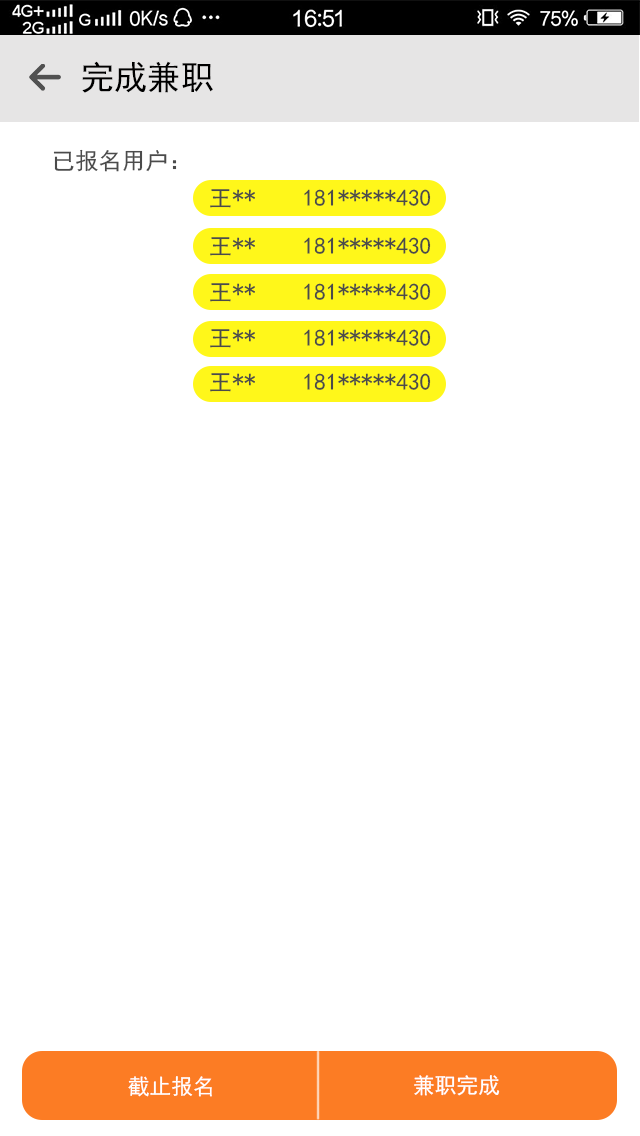
<style>
.page{position:relative;width:640px;height:1136px;background:#ffffff}
.page>*{position:absolute;margin:0}
.t1{font:33.3px "SimHei";letter-spacing:0.002em;color:#000000}
.t2{font:23.3px "SimHei";letter-spacing:0.002em;color:#4b4b4b}
.t3{font:21.7px "SimHei";letter-spacing:0.002em;color:#ffffff}
</style>
<div class="page">
<p class="t1" style="left:82px;top:61px;width:131px;height:32px">完成兼职</p>
<p class="t2" style="left:53px;top:149px;width:124px;height:23px">已报名用户：</p>
<p class="t2" style="left:210px;top:189px;width:221px;height:19px">王**    181*****430</p>
<p class="t2" style="left:210px;top:237px;width:221px;height:19px">王**    181*****430</p>
<p class="t2" style="left:210px;top:283px;width:221px;height:19px">王**    181*****430</p>
<p class="t2" style="left:210px;top:329px;width:221px;height:19px">王**    181*****430</p>
<p class="t2" style="left:210px;top:373px;width:221px;height:19px">王**    181*****430</p>
<p class="t3" style="left:128px;top:1076px;width:84px;height:21px">截止报名</p>
<p class="t3" style="left:414px;top:1075px;width:86px;height:21px">兼职完成</p>
</div>
